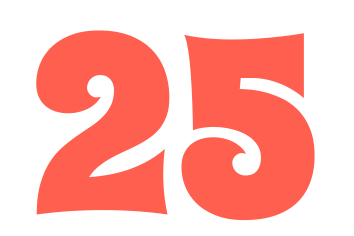
<style>
.page{position:relative;width:354px;height:236px;background:#ffffff}
.page>*{position:absolute;margin:0}
.t1{font:250px "SpicyRice-Regular";color:#ff5f4e}
</style>
<div class="page">
<p class="t1" style="left:36px;top:30px;width:279px;height:191px">25</p>
</div>
